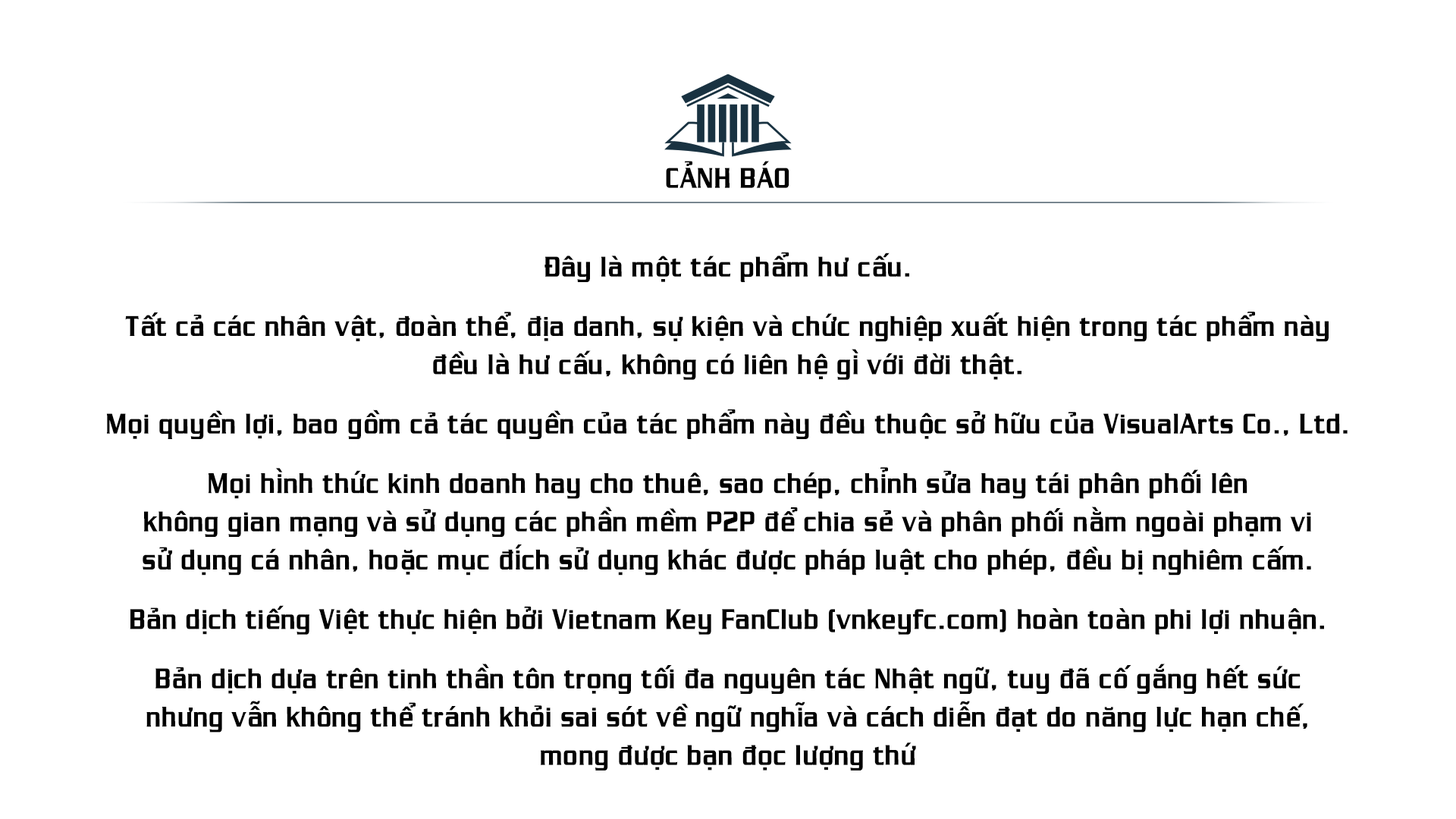
<style>
.page{position:relative;width:1456px;height:819px;background:#ffffff}
.page>*{position:absolute;margin:0}
.t1{font:31.8px "MTOChaney";color:#000000}
</style>
<div class="page">
<p class="t1" style="left:106px;top:161px;width:1242px;height:609px;text-align:center">CẢNH BÁO<br><br>Đây là một tác phẩm hư cấu.<br>Tất cả các nhân vật, đoàn thể, địa danh, sự kiện và chức nghiệp xuất hiện trong tác phẩm này đều là hư cấu, không có liên hệ gì với đời thật.<br>Mọi quyền lợi, bao gồm cả tác quyền của tác phẩm này đều thuộc sở hữu của VisualArts Co., Ltd.<br>Mọi hình thức kinh doanh hay cho thuê, sao chép, chỉnh sửa hay tái phân phối lên <br>không gian mạng và sử dụng các phần mềm P2P để chia sẻ và phân phối nằm ngoài phạm vi <br>sử dụng cá nhân, hoặc mục đích sử dụng khác được pháp luật cho phép, đều bị nghiêm cấm.<br>Bản dịch tiếng Việt thực hiện bởi Vietnam Key FanClub (vnkeyfc.com) hoàn toàn phi lợi nhuận.<br>Bản dịch dựa trên tinh thần tôn trọng tối đa nguyên tác Nhật ngữ, tuy đã cố gắng hết sức <br>nhưng vẫn không thể tránh khỏi sai sót về ngữ nghĩa và cách diễn đạt do năng lực hạn chế, <br>mong được bạn đọc lượng thứ</p>
</div>
